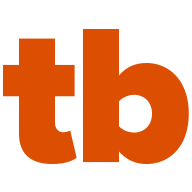
<style>
.page{position:relative;width:192px;height:192px;background:#ffffff}
.page>*{position:absolute;margin:0}
.t1{font:200px "ProximaNova-Black";letter-spacing:-0.025em;color:#dc4f02}
</style>
<div class="page">
<p class="t1" style="left:3px;top:29px;width:186px;height:135px">tb</p>
</div>
